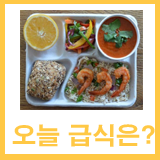
<style>
.page{position:relative;width:160px;height:160px;background:#ffffff}
.page>*{position:absolute;margin:0}
.t1{font:24px "H2gtrE";color:#ffc845}
</style>
<div class="page">
<p class="t1" style="left:12px;top:124px;width:143px;height:23px">오늘 급식은?</p>
</div>
